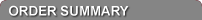
<style>
.page{position:relative;width:202px;height:20px;background:#858585}
.page>*{position:absolute;margin:0}
.t1{font:13.3px "Arial-BoldMT";color:#ffffff}
</style>
<div class="page">
<p class="t1" style="left:9px;top:5px;width:120px;height:11px">ORDER SUMMARY</p>
</div>
